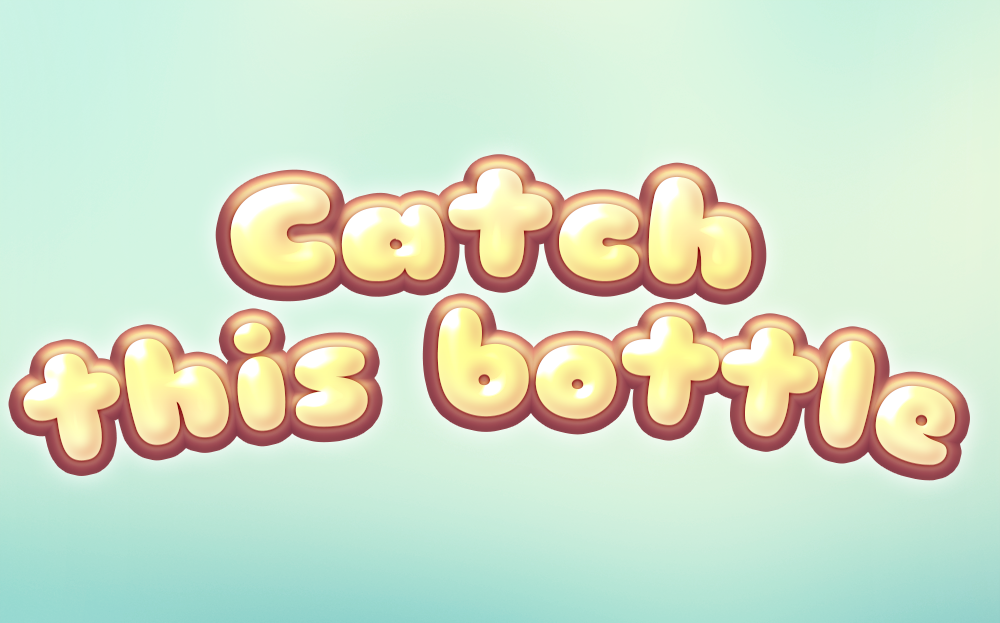
<style>
.page{position:relative;width:1000px;height:623px}
.page>*{position:absolute;margin:0}
.t1{font:140px/140px "Sniglet-ExtraBold"}
</style>
<div class="page">
<p class="t1" style="left:23px;top:169px;width:932px;height:297px;text-align:center">Catch<br>this bottle</p>
<p class="t1" style="left:23px;top:168px;width:932px;height:297px;text-align:center">Catch<br>this bottle</p>
</div>
